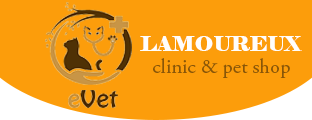
<style>
.page{position:relative;width:312px;height:120px;background:#fc9d0b}
.page>*{position:absolute;margin:0}
.t1{font:20.3px "Elephant-Regular";color:#fffefc}
.t2{font:20.3px "AGaramondPro-Regular";color:#895608}
</style>
<div class="page">
<p class="t1" style="left:140px;top:36px;width:162px;height:15px">LAMOUREUX</p>
<p class="t2" style="left:153px;top:58px;width:137px;height:20px">clinic &amp; pet shop</p>
</div>
